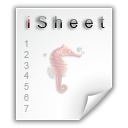
<style>
.page{position:relative;width:128px;height:128px;background:#ffffff}
.page>*{position:absolute;margin:0}
.t1{font:16px "ArialMT";letter-spacing:0.4em}
.t2{font:9px "ArialMT";letter-spacing:0.4em;color:#b2b2b2}
</style>
<div class="page">
<p class="t1" style="left:27px;top:16px;width:78px;height:12px">iSheet</p>
<p class="t2" style="left:23px;top:40px;width:6px;height:72px">1<br>2<br>3<br>4<br>5<br>6<br>7</p>
</div>
